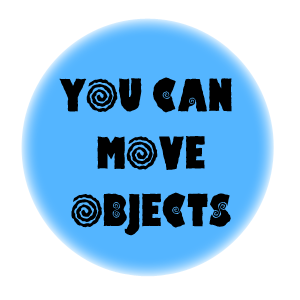
<style>
.page{position:relative;width:300px;height:300px;background:#ffffff}
.page>*{position:absolute;margin:0}
.t1{font:48px "HippoCritic";color:#000000}
</style>
<div class="page">
<p class="t1" style="left:59px;top:77px;width:173px;height:159px;text-align:center">YOU CAN <br>MOVE<br>OBJECTS</p>
</div>
